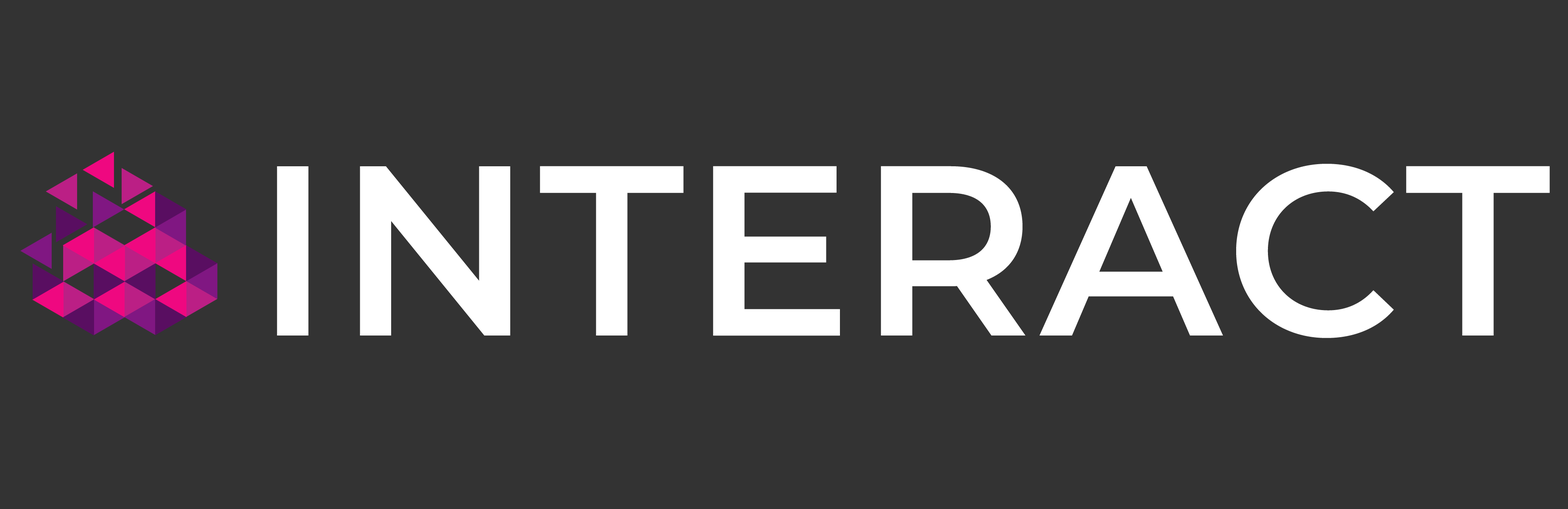
<style>
.page{position:relative;width:1568px;height:509px;background:#333333}
.page>*{position:absolute;margin:0}
.t1{font:241.6px "Montserrat-SemiBold";letter-spacing:0.025em;color:#ffffff}
</style>
<div class="page">
<p class="t1" style="left:277px;top:164px;width:1273px;height:174px">INTERACT</p>
</div>
